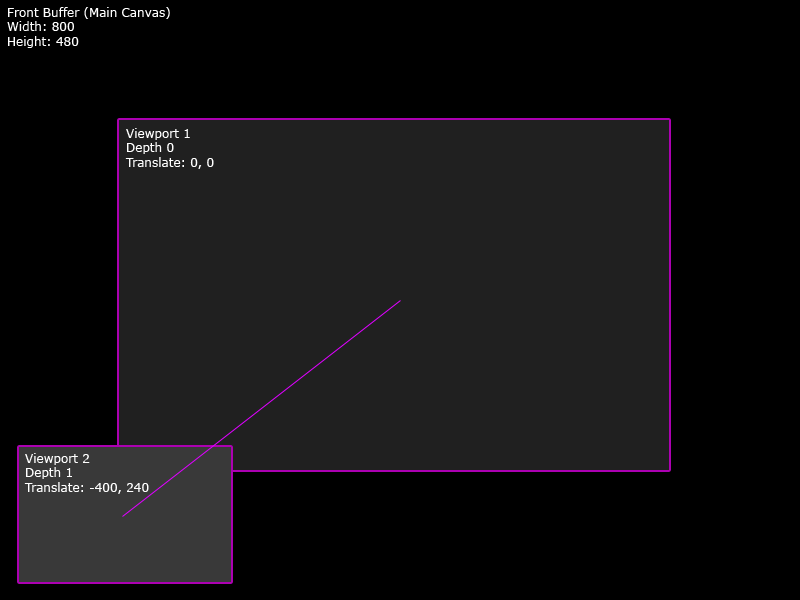
<style>
.page{position:relative;width:800px;height:600px;background:#000000}
.page>*{position:absolute;margin:0}
.t1{font:12px "Verdana";color:#ffffff}
</style>
<div class="page">
<p class="t1" style="left:7px;top:7px;width:163px;height:41px">Front Buffer (Main Canvas)<br>Width: 800<br>Height: 480</p>
<p class="t1" style="left:125px;top:128px;width:89px;height:41px">Viewport 1<br>Depth 0<br>Translate: 0, 0</p>
<p class="t1" style="left:24px;top:453px;width:125px;height:41px">Viewport 2<br>Depth 1<br>Translate: -400, 240</p>
</div>
